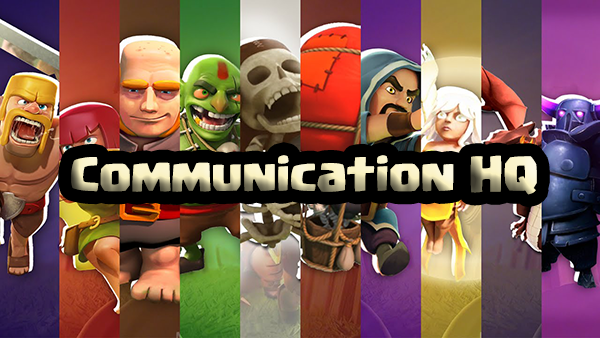
<style>
.page{position:relative;width:600px;height:338px}
.page>*{position:absolute;margin:0}
.t1{font:36px "Supercell-Magic"}
</style>
<div class="page">
<p class="t1" style="left:71px;top:155px;width:466px;height:40px">Communication HQ</p>
</div>
